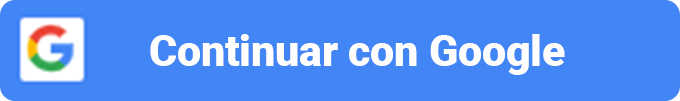
<style>
.page{position:relative;width:680px;height:101px;background:#4285f4}
.page>*{position:absolute;margin:0}
.t1{font:42.5px "Roboto-Black";color:#fffefe}
</style>
<div class="page">
<p class="t1" style="left:150px;top:34px;width:415px;height:41px">Continuar con Google</p>
</div>
